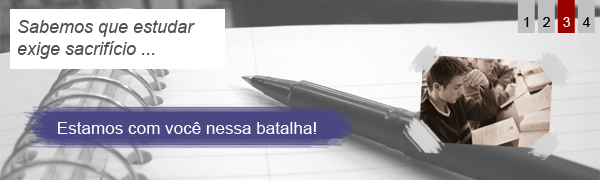
<style>
.page{position:relative;width:600px;height:180px}
.page>*{position:absolute;margin:0}
.t1{font:14px "ArialMT";color:#000000}
.t2{font:14px "ArialMT";color:#ffffff}
.t3{font:18px "Arial-ItalicMT";color:#505050}
.t4{font:17.1px "ArialMT";color:#fdfdfe}
</style>
<div class="page">
<p class="t1" style="left:524px;top:17px;width:5px;height:10px">1</p>
<p class="t1" style="left:543px;top:17px;width:7px;height:10px">2</p>
<p class="t2" style="left:563px;top:17px;width:7px;height:10px">3</p>
<p class="t1" style="left:582px;top:17px;width:8px;height:10px">4</p>
<p class="t3" style="left:17px;top:20px;width:178px;height:39px">Sabemos que estudar <br>exige sacrifício ...</p>
<p class="t4" style="left:58px;top:122px;width:258px;height:12px">Estamos com você nessa batalha!</p>
</div>
